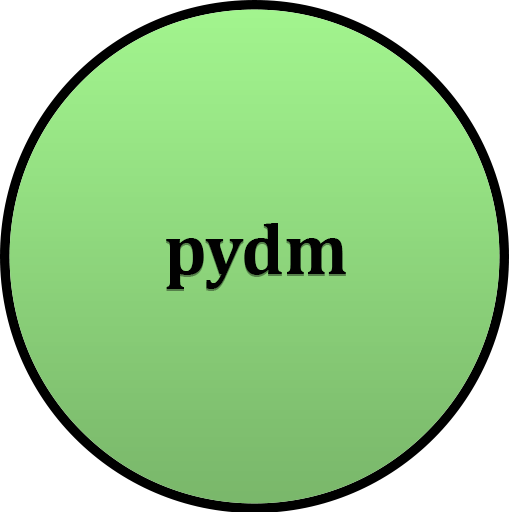
<style>
.page{position:relative;width:512px;height:512px;background:#ffffff}
.page>*{position:absolute;margin:0}
.t1{font:72px "Cambria-Bold";color:#010101}
</style>
<div class="page">
<p class="t1" style="left:166px;top:223px;width:180px;height:66px">pydm</p>
</div>
